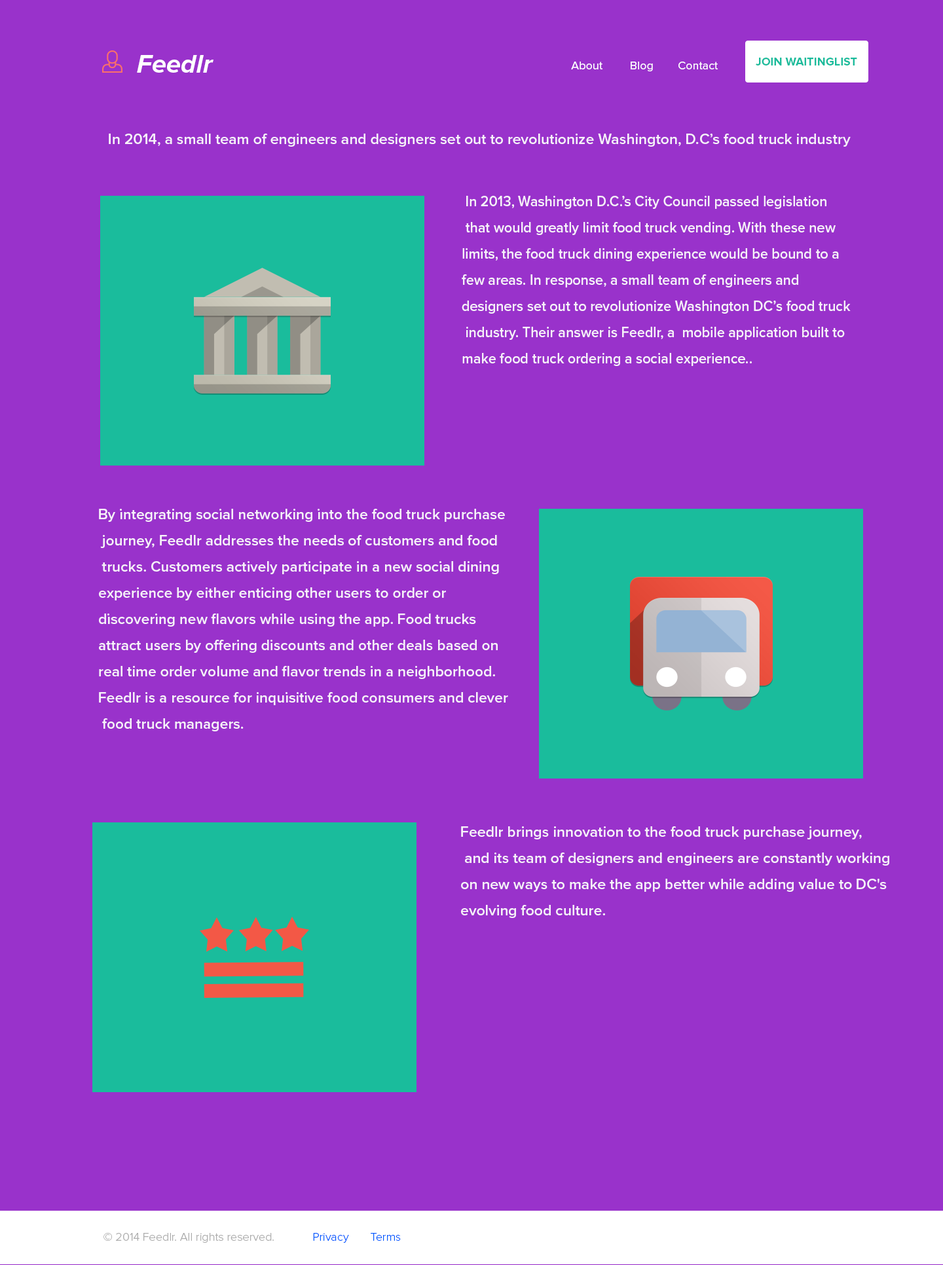
<style>
.page{position:relative;width:943px;height:1265px;background:#9932cb}
.page>*{position:absolute;margin:0}
.t1{font:26.2px "ProximaNova-BoldIt";color:#ffffff}
.t2{font:11.7px "ProximaNova-Regular";color:#ffffff}
.t3{font:11.8px "ProximaNova-Bold";color:#1abc9c}
.t4{font:15.1px "ProximaNova-Semibold";color:#f7f2f9}
.t5{font:15.1px/26.2px "ProximaNova-Semibold";color:#f7f2f9;scale:0.94 1}
.t6{font:15.1px/26.2px "ProximaNova-Semibold";color:#f7f2f9}
.t7{font:11.8px "ProximaNova-Light";color:#acacac}
.t8{font:11.8px "ProximaNova-Light";color:#005aff}
</style>
<div class="page">
<p class="t1" style="left:137px;top:55px;width:76px;height:18px">Feedlr</p>
<p class="t2" style="left:571px;top:62px;width:147px;height:9px">About         Blog        Contact</p>
<p class="t3" style="left:756px;top:58px;width:101px;height:7px">JOIN WAITINGLIST</p>
<p class="t4" style="left:109px;top:134px;width:741px;height:13px">In 2014, a small team of engineers and designers set out to revolutionize Washington, D.C’s food truck industry</p>
<p class="t5" style="left:462px;top:196px;width:388px;height:170px">In 2013, Washington D.C.’s City Council passed legislation<br> that would greatly limit food truck vending. With these new <br>limits, the food truck dining experience would be bound to a <br>few areas. In response, a small team of engineers and <br>designers set out to revolutionize Washington DC’s food truck<br> industry. Their answer is Feedlr, a  mobile application built to <br>make food truck ordering a social experience..</p>
<p class="t6" style="left:99px;top:509px;width:409px;height:222px">By integrating social networking into the food truck purchase<br> journey, Feedlr addresses the needs of customers and food<br> trucks. Customers actively participate in a new social dining <br>experience by either enticing other users to order or <br>discovering new flavors while using the app. Food trucks <br>attract users by offering discounts and other deals based on <br>real time order volume and flavor trends in a neighborhood. <br>Feedlr is a resource for inquisitive food consumers and clever<br> food truck managers.</p>
<p class="t6" style="left:461px;top:826px;width:428px;height:92px">Feedlr brings innovation to the food truck purchase journey,<br> and its team of designers and engineers are constantly working <br>on new ways to make the app better while adding value to DC's <br>evolving food culture.</p>
<p class="t7" style="left:103px;top:1233px;width:171px;height:10px">© 2014 Feedlr. All rights reserved.</p>
<p class="t8" style="left:313px;top:1233px;width:36px;height:10px">Privacy</p>
<p class="t8" style="left:371px;top:1233px;width:30px;height:8px">Terms</p>
</div>
